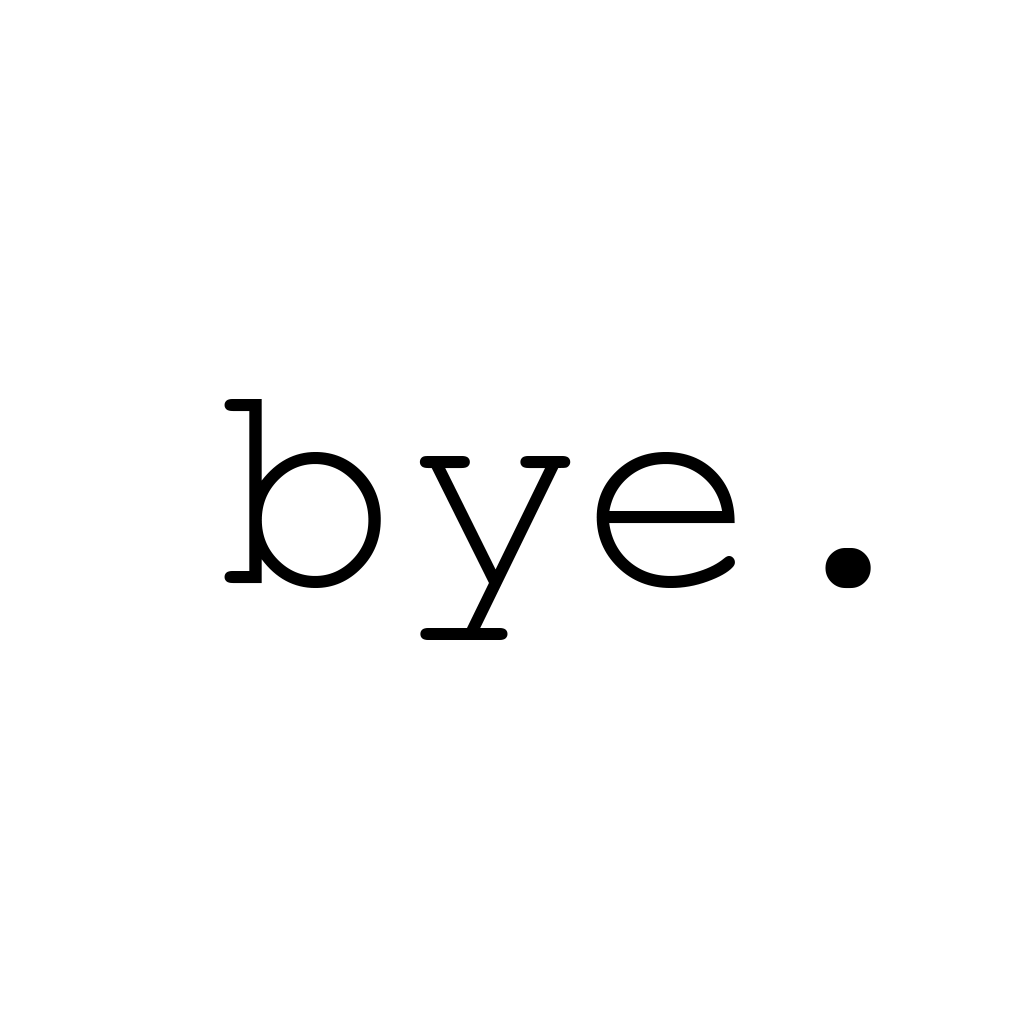
<style>
.page{position:relative;width:1024px;height:1024px;background:#ffffff}
.page>*{position:absolute;margin:0}
.t1{font:300px "CourierNewPSMT";color:#000000}
</style>
<div class="page">
<p class="t1" style="left:224px;top:399px;width:647px;height:241px">bye.</p>
</div>
